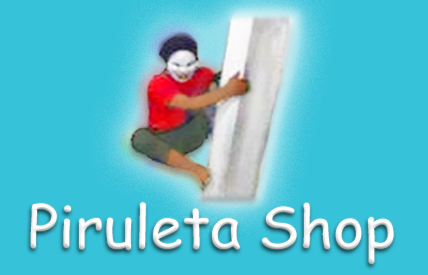
<style>
.page{position:relative;width:428px;height:275px;background:#36c2d9}
.page>*{position:absolute;margin:0}
.t1{font:57.3px "ComicSansMS";color:#ffffff;scale:1.03 1}
</style>
<div class="page">
<p class="t1" style="left:30px;top:202px;width:364px;height:62px">Piruleta Shop</p>
</div>
